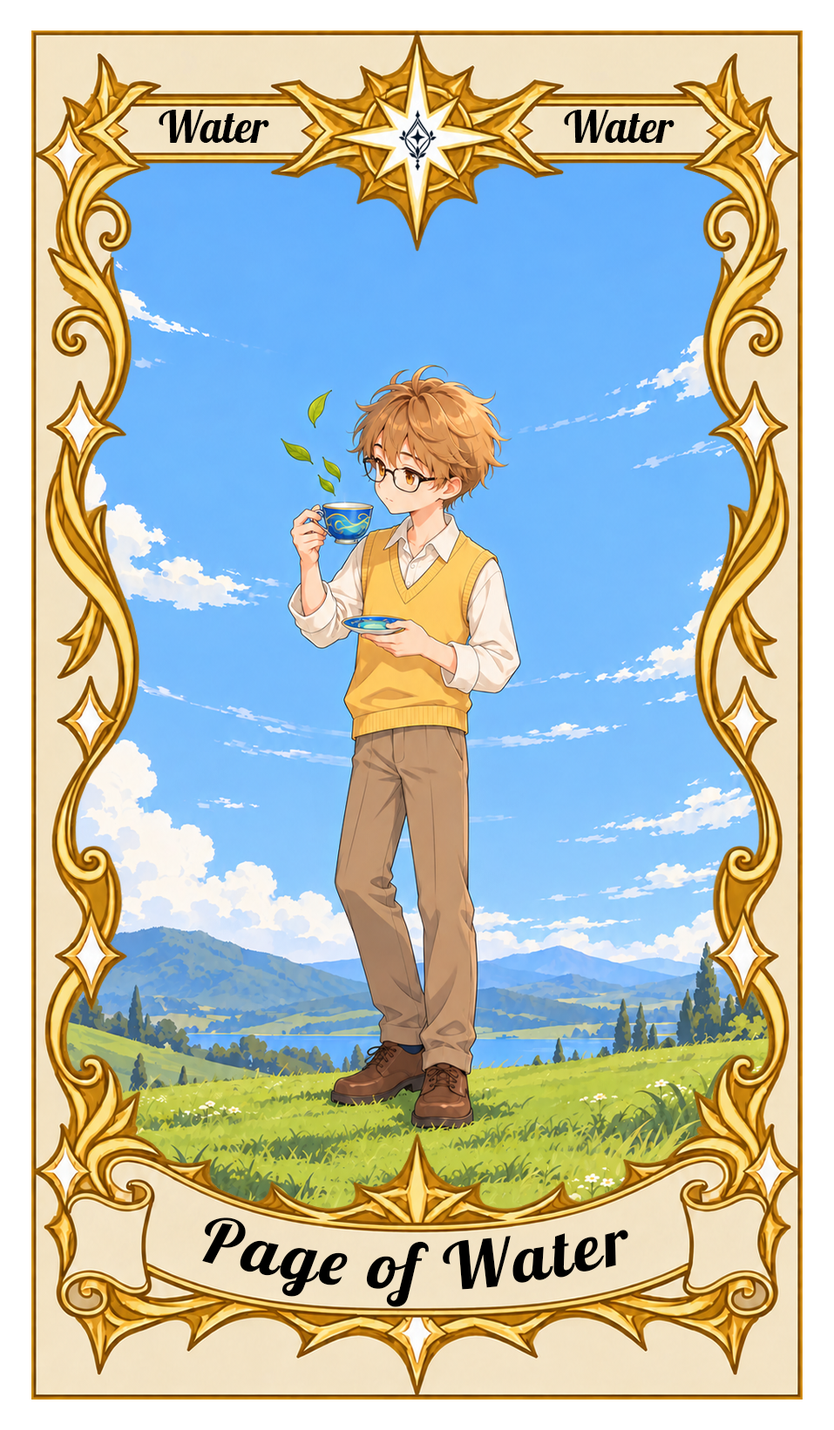
<style>
.page{position:relative;width:834px;height:1430px}
.page>*{position:absolute;margin:0}
.t1{font:43.6px "Lobster-Regular";color:#000000}
.t2{font:65.3px "Lobster-Regular";letter-spacing:0.05em;color:#000000}
</style>
<div class="page">
<p class="t1" style="left:159px;top:110px;width:110px;height:33px">Water</p>
<p class="t1" style="left:564px;top:110px;width:110px;height:33px">Water</p>
<p class="t2" style="left:202px;top:1218px;width:426px;height:90px">Page of Water</p>
</div>
